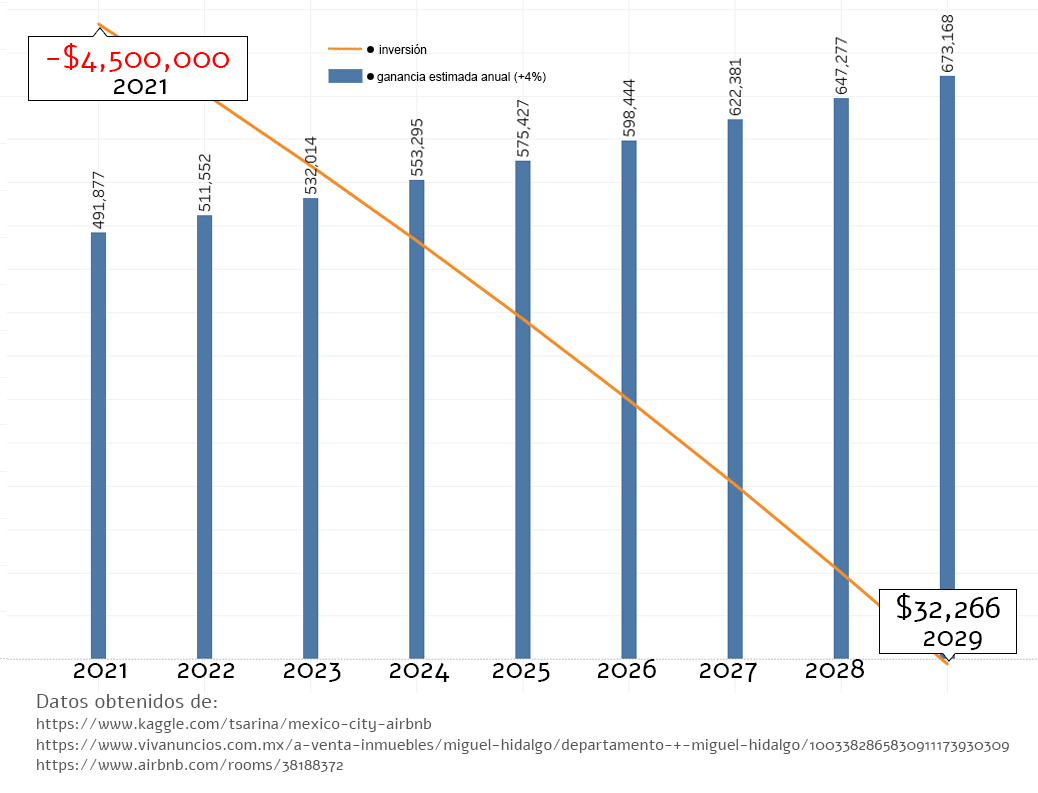
<style>
.page{position:relative;width:1038px;height:793px;background:#ffffff}
.page>*{position:absolute;margin:0}
.t1{font:31.6px "Alef-Regular";color:#ff0000}
.t2{font:12px "ArialMT";color:#000000}
.t3{font:29.3px "Alef-Regular";color:#000000}
.t4{font:31.6px "Alef-Regular";color:#000000}
.t5{font:20.3px "Alef-Regular";color:#575757}
.t6{font:16.1px "Alef-Regular";color:#575757}
</style>
<div class="page">
<p class="t1" style="left:47px;top:43px;width:183px;height:29px">-$4,500,000</p>
<p class="t2" style="left:379px;top:44px;width:48px;height:10px">inversión</p>
<p class="t2" style="left:377px;top:72px;width:169px;height:11px">ganancia estimada anual (+4%)</p>
<p class="t3" style="left:114px;top:79px;width:52px;height:15px">2021</p>
<p class="t4" style="left:897px;top:593px;width:103px;height:29px">$32,266</p>
<p class="t3" style="left:924px;top:631px;width:58px;height:19px">2029</p>
<p class="t3" style="left:74px;top:663px;width:52px;height:15px">2021</p>
<p class="t3" style="left:178px;top:663px;width:57px;height:15px">2022</p>
<p class="t3" style="left:284px;top:662px;width:57px;height:20px">2023</p>
<p class="t3" style="left:390px;top:663px;width:60px;height:19px">2024</p>
<p class="t3" style="left:493px;top:662px;width:57px;height:20px">2025</p>
<p class="t3" style="left:598px;top:659px;width:58px;height:19px">2026</p>
<p class="t3" style="left:700px;top:662px;width:57px;height:20px">2027</p>
<p class="t3" style="left:806px;top:659px;width:58px;height:19px">2028</p>
<p class="t5" style="left:37px;top:694px;width:180px;height:14px">Datos obtenidos de:</p>
<p class="t6" style="left:37px;top:718px;width:395px;height:15px">https://www.kaggle.com/tsarina/mexico-city-airbnb</p>
<p class="t6" style="left:37px;top:739px;width:972px;height:15px">https://www.vivanuncios.com.mx/a-venta-inmuebles/miguel-hidalgo/departamento-+-miguel-hidalgo/1003382865830911173930309</p>
<p class="t6" style="left:37px;top:759px;width:306px;height:14px">https://www.airbnb.com/rooms/38188372</p>
</div>
